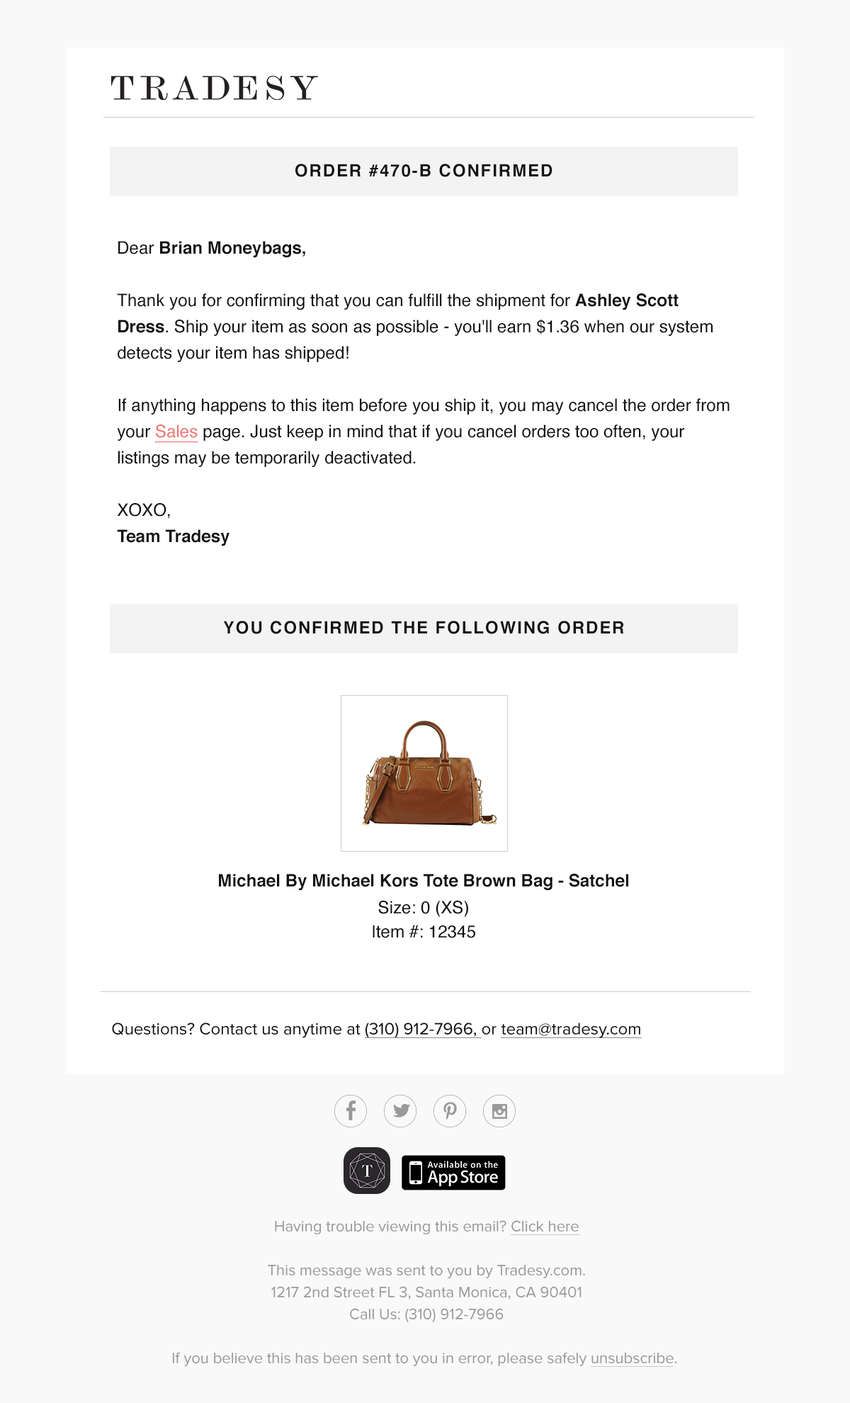
<style>
.page{position:relative;width:850px;height:1403px;background:#ffffff}
.page>*{position:absolute;margin:0}
.t1{font:17px "Helvetica-Bold";letter-spacing:0.08em;color:#111111;text-transform:uppercase}
.t2{font:17.1px/26.2px "Helvetica";color:#111111}
.t3{font:17.1px/26.2px "Helvetica-Bold";color:#111111}
.t4{font:17.1px/26.2px "Helvetica";color:#ee7873;text-decoration:underline}
.t5{font:17.1px "Helvetica-Bold";color:#111111}
.t6{font:17.1px/24.1px "Helvetica";color:#111111}
.t7{font:17px "ProximaNova-Regular";color:#111111}
.t8{font:17px "ProximaNova-Regular";color:#111111;text-decoration:underline}
.t9{font:15.6px/22px "ProximaNova-Regular";color:#999999}
.t10{font:15.6px/22px "ProximaNova-Regular";color:#999999;text-decoration:underline}
</style>
<div class="page">
<p class="t1" style="left:295px;top:164px;width:258px;height:13px">Order #470-B Confirmed</p>
<p class="t2" style="left:117px;top:241px;width:613px;height:305px">Dear<span class="t3"> Brian Moneybags,<br></span><br>Thank you for confirming that you can fulfill the shipment for <span class="t3">Ashley Scott Dress</span>. Ship your item as soon as possible - you'll earn $1.36 when our system detects your item has shipped!<br><br>If anything happens to this item before you ship it, you may cancel the order from your <span class="t4">Sales</span> page. Just keep in mind that if you cancel orders too often, your listings may be temporarily deactivated.<br><br>XOXO,<br><span class="t3">Team Tradesy</span></p>
<p class="t1" style="left:223px;top:621px;width:401px;height:13px">YOU CONFIRMED THE FOLLOWING ORDER</p>
<p class="t5" style="left:219px;top:873px;width:409px;height:17px">Michael By Michael Kors Tote Brown Bag - Satchel</p>
<p class="t6" style="left:373px;top:900px;width:102px;height:38px;text-align:center">Size: 0 (XS)<br>Item #: 12345</p>
<p class="t7" style="left:112px;top:1022px;width:530px;height:16px">Questions? Contact us anytime at <span class="t8">(310) 912-7966, </span>or <span class="t8">team@tradesy.com</span></p>
<p class="t9" style="left:173px;top:1220px;width:504px;height:147px;text-align:center">Having trouble viewing this email? <span class="t10">Click here<br></span><br>This message was sent to you by Tradesy.com.<br>1217 2nd Street FL 3, Santa Monica, CA 90401<br>Call Us: (310) 912-7966<br><br>If you believe this has been sent to you in error, please safely <span class="t10">unsubscribe</span>.</p>
</div>
